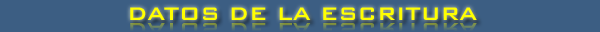
<style>
.page{position:relative;width:600px;height:32px;background:#3c5e83}
.page>*{position:absolute;margin:0}
.t1{font:24px "BankGothicBT-Medium";color:#ffff01}
</style>
<div class="page">
<p class="t1" style="left:130px;top:7px;width:347px;height:13px">DATOS DE LA ESCRITURA</p>
</div>
